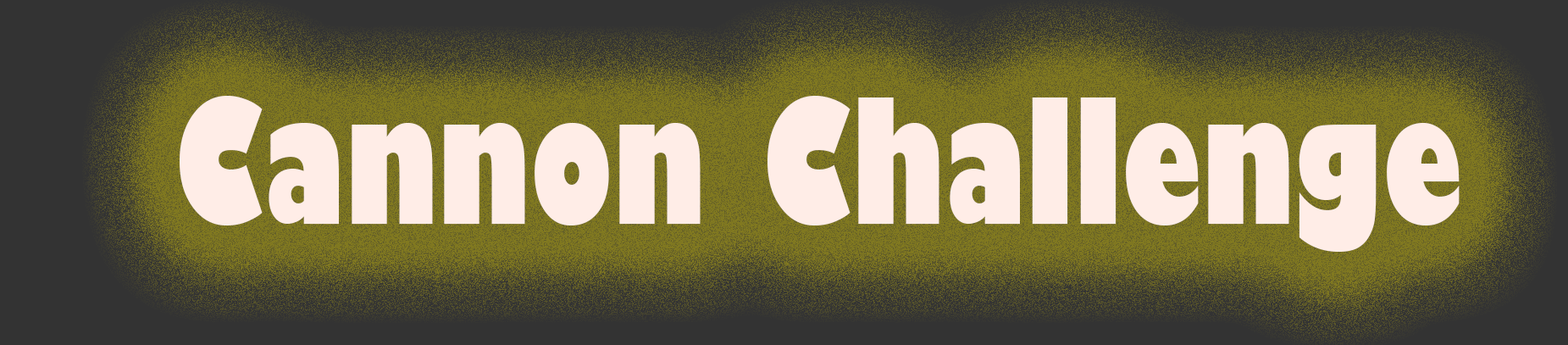
<style>
.page{position:relative;width:1568px;height:345px}
.page>*{position:absolute;margin:0}
.t1{font:169.4px "GillSans-UltraBoldCondensed";color:#ffede7}
</style>
<div class="page">
<p class="t1" style="left:180px;top:96px;width:1280px;height:156px">Cannon Challenge</p>
</div>
